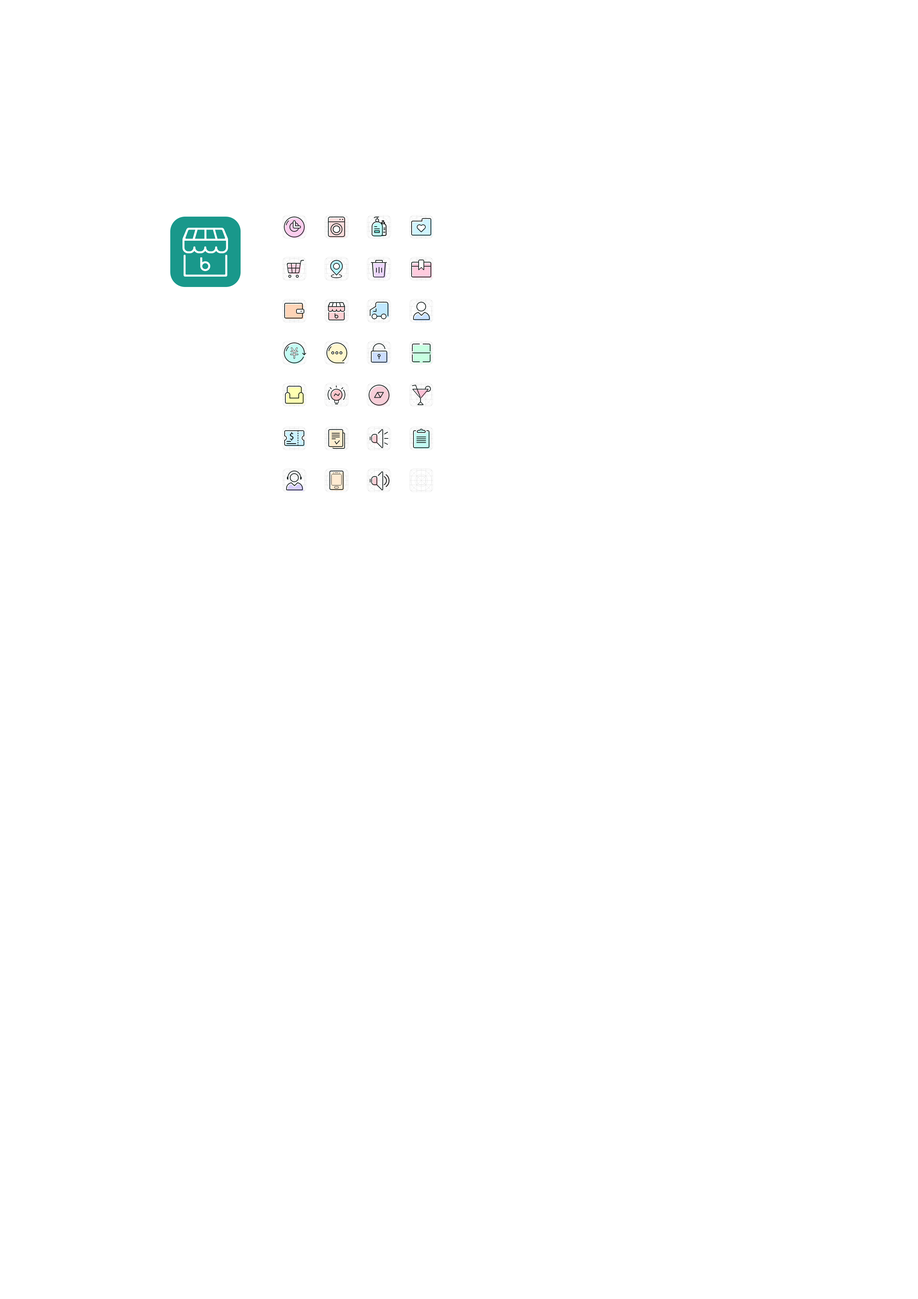
<style>
.page{position:relative;width:918px;height:1299px;background:#ffffff}
.page>*{position:absolute;margin:0}
.t1{font:9.3px "SimSun";color:#1e2625}
</style>
<div class="page">
<p class="t1" style="left:290px;top:432px;width:4px;height:9px">$</p>
</div>
